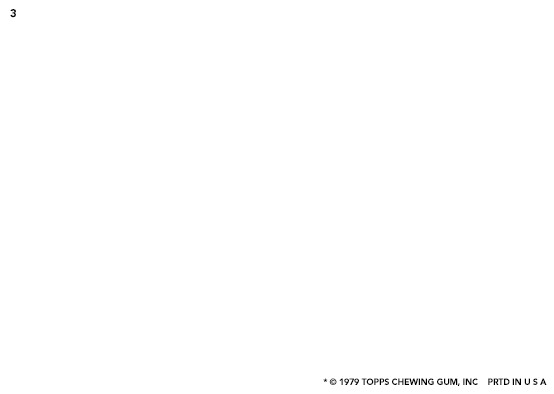
<style>
.page{position:relative;width:554px;height:394px;background:#ffffff}
.page>*{position:absolute;margin:0}
.t1{font:11.1px "Avenir-Black";letter-spacing:-0.025em;color:#000000}
.t2{font:8.9px "Avenir-Black";letter-spacing:-0.025em;color:#000000}
</style>
<div class="page">
<p class="t1" style="left:10px;top:9px;width:6px;height:9px">3</p>
<p class="t2" style="left:323px;top:378px;width:224px;height:8px">* © 1979 TOPPS CHEWING GUM, INC    PRTD IN U S A</p>
</div>
